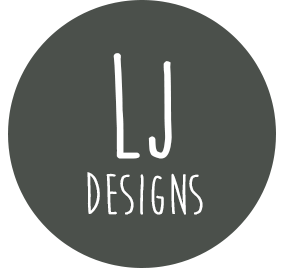
<style>
.page{position:relative;width:285px;height:275px;background:#4b504b}
.page>*{position:absolute;margin:0}
.t1{font:146.3px "MoonFlowerBold";color:#ffffff}
.t2{font:58.7px "MoonFlowerBold";color:#ffffff}
</style>
<div class="page">
<p class="t1" style="left:113px;top:53px;width:59px;height:106px">LJ</p>
<p class="t2" style="left:87px;top:172px;width:116px;height:43px">designs</p>
</div>
